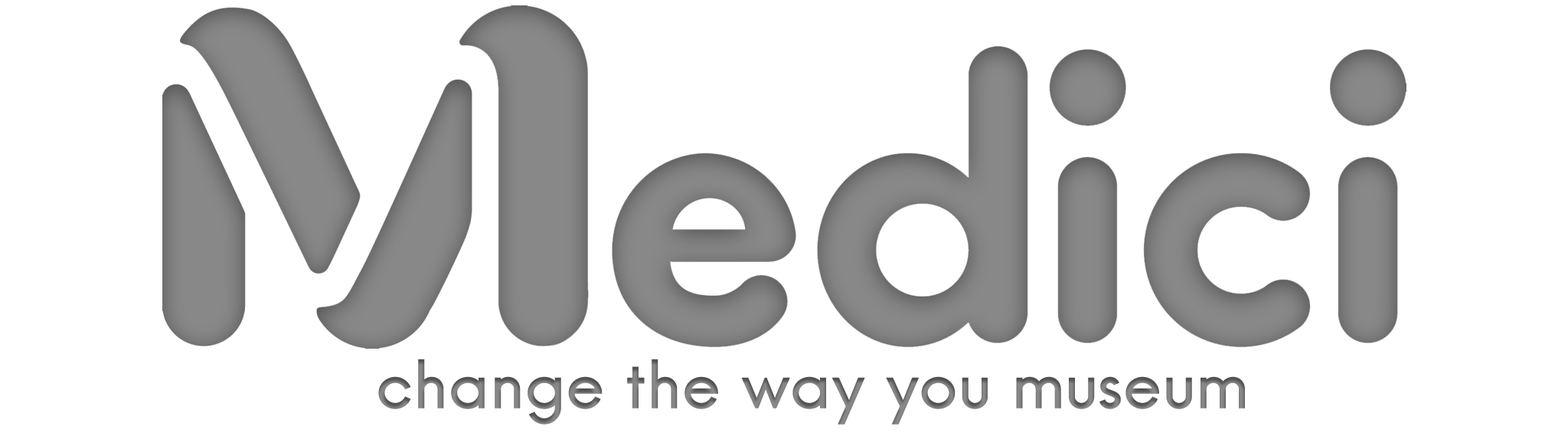
<style>
.page{position:relative;width:1568px;height:433px;background:#ffffff}
.page>*{position:absolute;margin:0}
.t1{font:65.1px "HansKendrick-Medium";color:#888888}
</style>
<div class="page">
<p class="t1" style="left:378px;top:358px;width:867px;height:66px">change the way you museum</p>
</div>
